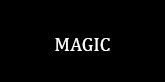
<style>
.page{position:relative;width:165px;height:82px;background:#000000}
.page>*{position:absolute;margin:0}
.t1{font:19.1px "Cambria";color:#ffffff}
</style>
<div class="page">
<p class="t1" style="left:55px;top:38px;width:55px;height:13px">MAGIC</p>
</div>
